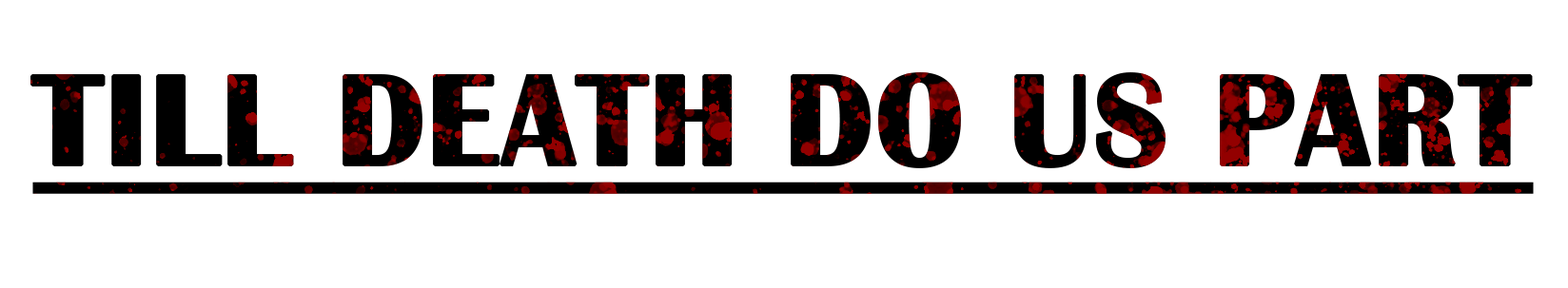
<style>
.page{position:relative;width:1568px;height:288px;background:#ffffff}
.page>*{position:absolute;margin:0}
.t1{font:133.2px "BritannicBold";color:#000000;text-transform:uppercase;font-weight:bold;text-decoration:underline}
</style>
<div class="page">
<p class="t1" style="left:30px;top:72px;width:1504px;height:122px">Till death do us part</p>
</div>
